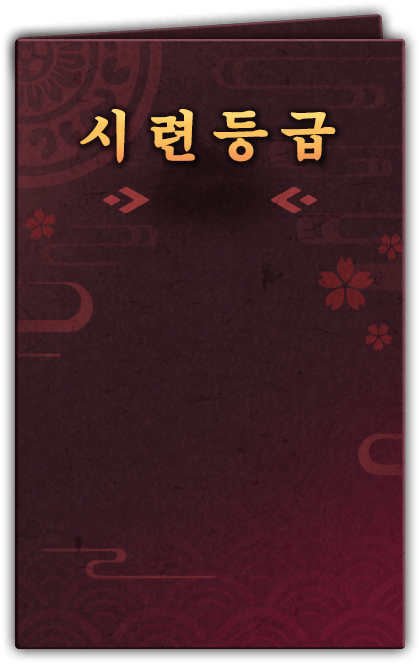
<style>
.page{position:relative;width:420px;height:664px}
.page>*{position:absolute;margin:0}
.t1{font:57px "MJemokBatang";letter-spacing:0.16em;color:#fec25e;font-weight:bold}
</style>
<div class="page">
<p class="t1" style="left:80px;top:109px;width:256px;height:54px">시련등급</p>
</div>
